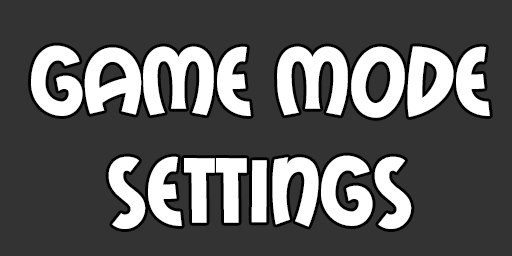
<style>
.page{position:relative;width:512px;height:256px;background:#333333}
.page>*{position:absolute;margin:0}
.t1{font:91.8px "MailRayStuff-Regular";color:#ffffff}
</style>
<div class="page">
<p class="t1" style="left:31px;top:45px;width:459px;height:184px;text-align:center">game mode<br>settings</p>
</div>
